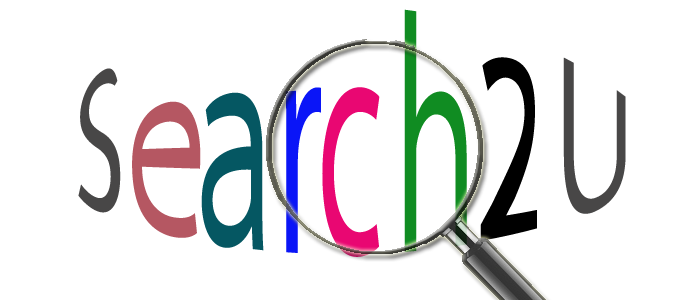
<style>
.page{position:relative;width:700px;height:300px;background:#ffffff}
.page>*{position:absolute;margin:0}
.t1{font:127.9px "MyriadPro-Regular";color:#484747;scale:1.11 1}
.t2{font:127.9px "MyriadPro-Regular";color:#b55762;scale:1.11 1}
.t3{font:127.9px "MyriadPro-Regular";color:#055762;scale:1.11 1}
.t4{font:127.9px "MyriadPro-Regular";color:#0a15f7;scale:1.11 1}
.t5{font:127.9px "MyriadPro-Regular";color:#e90772;scale:1.11 1}
.t6{font:127.9px "MyriadPro-Regular";color:#108c22;scale:1.11 1}
.t7{font:127.9px "MyriadPro-Semibold";color:#000000;scale:1.11 1}
</style>
<div class="page">
<p class="t1" style="left:78px;top:9px;width:548px;height:248px">S<span class="t2">e</span><span class="t3">a</span><span class="t4">r</span><span class="t5">c</span><span class="t6">h</span><span class="t7">2</span>U</p>
</div>
